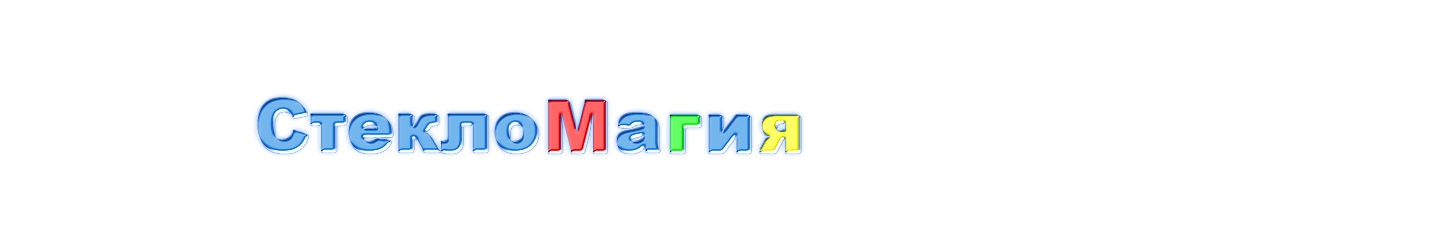
<style>
.page{position:relative;width:1440px;height:250px;background:#ffffff}
.page>*{position:absolute;margin:0}
.t1{font:72px "Arial-Black"}
</style>
<div class="page">
<p class="t1" style="left:257px;top:98px;width:281px;height:54px">Стекло</p>
<p class="t1" style="left:548px;top:100px;width:59px;height:52px">М</p>
<p class="t1" style="left:616px;top:113px;width:44px;height:39px">а</p>
<p class="t1" style="left:669px;top:115px;width:32px;height:37px">г</p>
<p class="t1" style="left:708px;top:115px;width:42px;height:37px">и</p>
<p class="t1" style="left:759px;top:115px;width:41px;height:37px">я</p>
</div>
